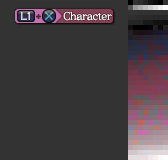
<style>
.page{position:relative;width:168px;height:160px;background:#333333}
.page>*{position:absolute;margin:0}
.t1{font:10.7px "MatissePro-M";letter-spacing:-0.03em;color:#fefefe}
.t2{font:10.7px "MatissePro-M";letter-spacing:-0.03em;color:#fefefe;scale:0.9 1}
</style>
<div class="page">
<p class="t1" style="left:63px;top:11px;width:49px;height:10px"><span class="t2">C</span>haracter</p>
</div>
